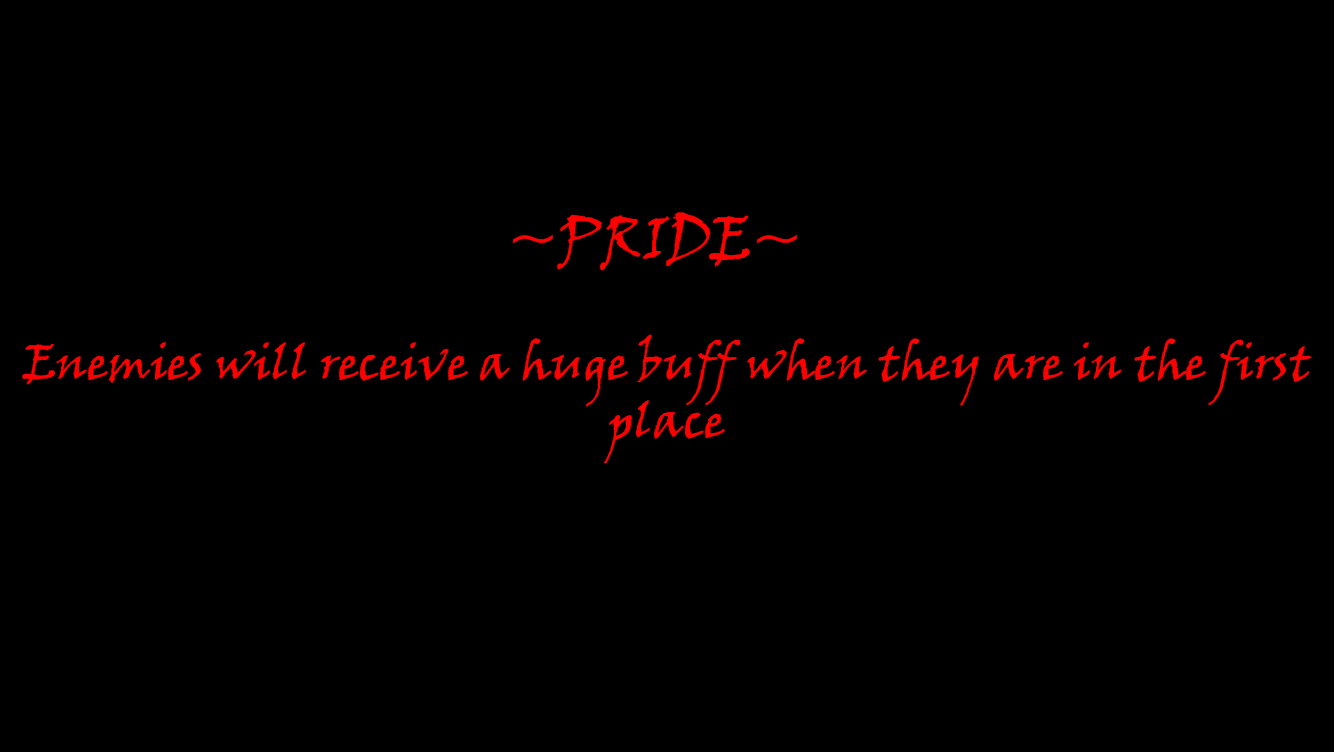
<style>
.page{position:relative;width:1334px;height:752px;background:#000000}
.page>*{position:absolute;margin:0}
.t1{font:60px "VinerHandITC";color:#ff0000}
.t2{font:48px "VinerHandITC";color:#ff0000}
</style>
<div class="page">
<p class="t1" style="left:513px;top:212px;width:284px;height:59px">~PRIDE~</p>
<p class="t2" style="left:22px;top:334px;width:1290px;height:130px;text-align:center">Enemies will receive a huge buff when they are in the first place</p>
</div>
